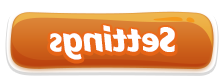
<style>
.page{position:relative;width:224px;height:84px;background:#ffffff}
.page>*{position:absolute;margin:0}
.t1{font:32.5px "CarterOne";letter-spacing:-0.02em;color:#ffffff}
</style>
<div class="page">
<p class="t1" style="left:50px;top:25px;width:125px;height:35px;rotate:180deg">Settings</p>
</div>
